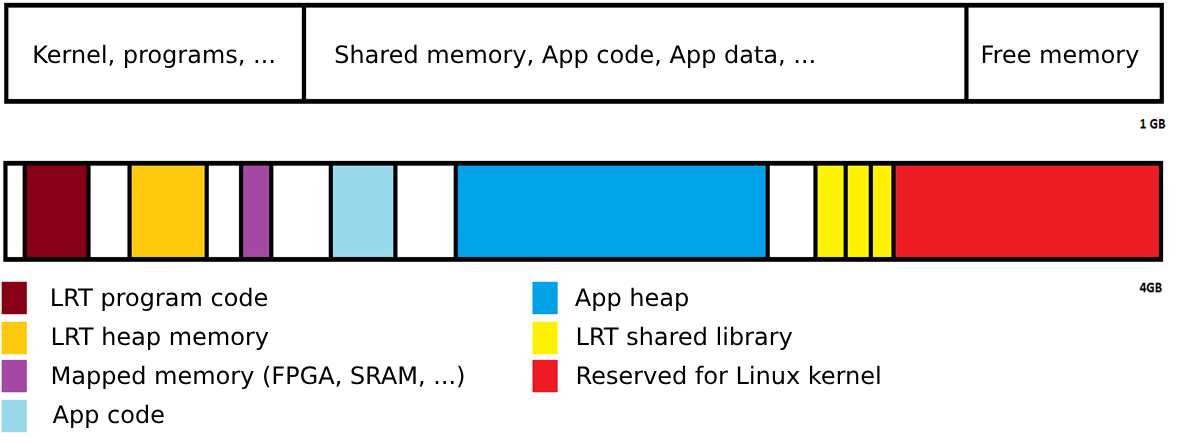
<style>
.page{position:relative;width:1179px;height:445px;background:#ffffff}
.page>*{position:absolute;margin:0}
.t1{font:24px "DejaVuSans";color:#000000}
</style>
<div class="page">
<p class="t1" style="left:34px;top:44px;width:240px;height:24px">Kernel, programs, ...</p>
<p class="t1" style="left:335px;top:44px;width:479px;height:24px">Shared memory, App code, App data, ...</p>
<p class="t1" style="left:982px;top:45px;width:157px;height:23px">Free memory</p>
<p class="t1" style="left:52px;top:287px;width:216px;height:24px">LRT program code</p>
<p class="t1" style="left:575px;top:287px;width:113px;height:24px">App heap</p>
<p class="t1" style="left:52px;top:326px;width:217px;height:24px">LRT heap memory</p>
<p class="t1" style="left:577px;top:326px;width:216px;height:24px">LRT shared library</p>
<p class="t1" style="left:52px;top:365px;width:412px;height:24px">Mapped memory (FPGA, SRAM, ...)</p>
<p class="t1" style="left:577px;top:365px;width:303px;height:20px">Reserved for Linux kernel</p>
<p class="t1" style="left:52px;top:404px;width:112px;height:24px">App code</p>
</div>
